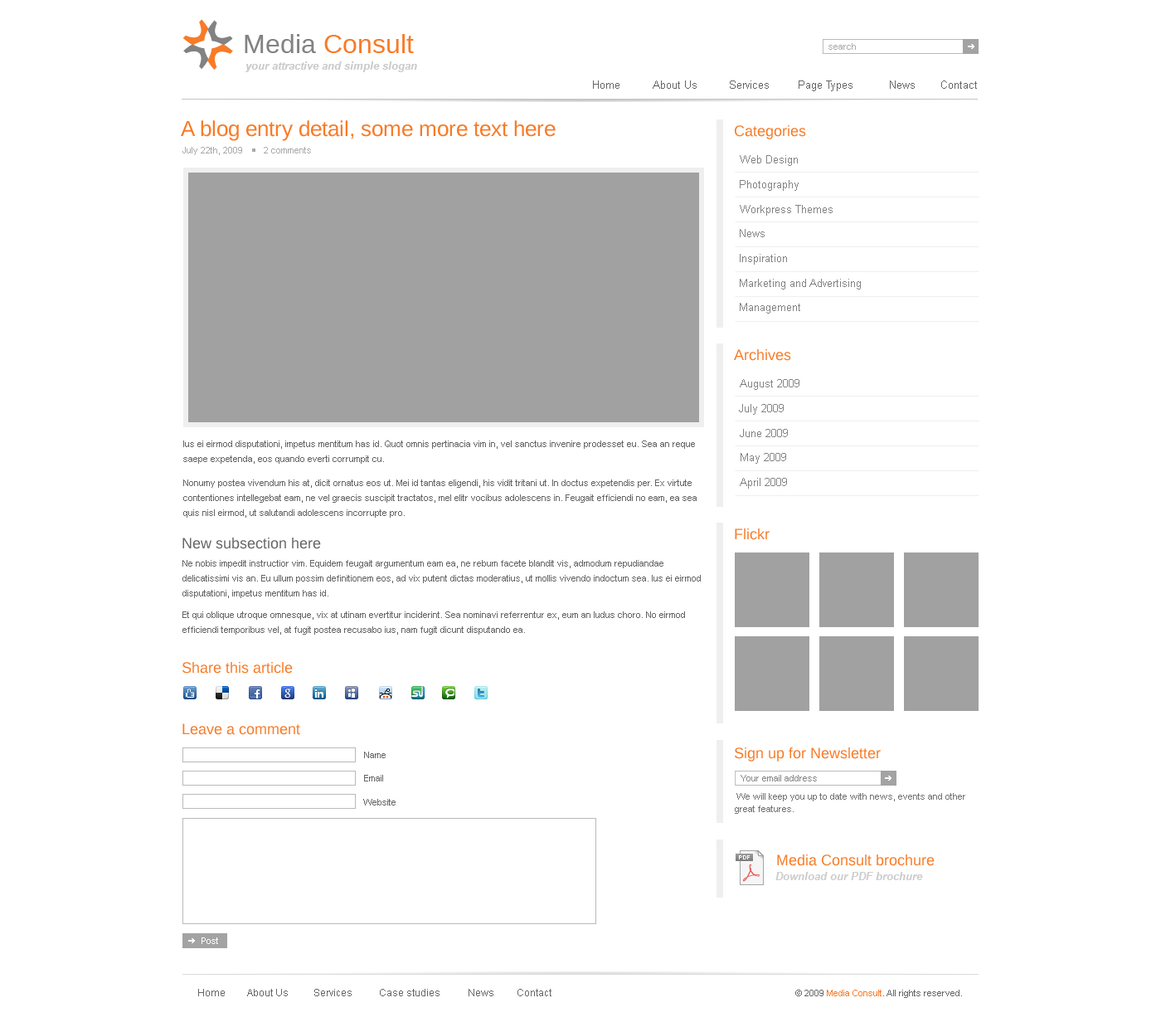
<style>
.page{position:relative;width:1161px;height:1027px;background:#ffffff}
.page>*{position:absolute;margin:0}
.t1{font:26.5px "LiberationSans-Regular";color:#828282}
.t2{font:26.5px "LiberationSans-Regular";color:#f87b27}
.t3{font:9.1px "ArialMT";color:#aaaaaa}
.t4{font:10.8px "Arial-BoldItalicMT";color:#cacaca}
.t5{font:10.8px "ArialMT";color:#666666}
.t6{font:21.6px "LiberationSans-Regular";color:#f87b27}
.t7{font:14.9px "LiberationSans-Regular";color:#f87b27}
.t8{font:10.8px "ArialMT";color:#828282}
.t9{font:9.1px/14.9px "ArialMT";color:#666666}
.t10{font:14.9px "LiberationSans-Regular";color:#666666}
.t11{font:9.1px "ArialMT";color:#666666}
.t12{font:9.1px "ArialMT";color:#828282}
.t13{font:9.1px/12.4px "ArialMT";color:#666666}
.t14{font:5.8px "LiberationSans-Regular";letter-spacing:0.06em;color:#ffffff}
.t15{font:5.8px "LiberationSans-Regular";color:#ffffff}
.t16{font:9.1px "ArialMT";color:#ffffff}
.t17{font:10px "ArialMT";color:#666666}
.t18{font:9.1px "ArialMT";color:#f87b27}
</style>
<div class="page">
<p class="t1" style="left:245px;top:34px;width:71px;height:19px">Media</p>
<p class="t2" style="left:324px;top:34px;width:90px;height:19px">Consult</p>
<p class="t3" style="left:829px;top:43px;width:27px;height:7px">search</p>
<p class="t4" style="left:246px;top:61px;width:171px;height:11px">your attractive and simple slogan</p>
<p class="t5" style="left:593px;top:80px;width:27px;height:9px">Home</p>
<p class="t5" style="left:653px;top:80px;width:44px;height:9px">About Us</p>
<p class="t5" style="left:730px;top:80px;width:39px;height:9px">Services</p>
<p class="t5" style="left:799px;top:80px;width:54px;height:11px">Page Types</p>
<p class="t5" style="left:890px;top:80px;width:25px;height:9px">News</p>
<p class="t5" style="left:941px;top:80px;width:36px;height:9px">Contact</p>
<p class="t6" style="left:181px;top:120px;width:375px;height:21px">A blog entry detail, some more text here</p>
<p class="t7" style="left:735px;top:125px;width:71px;height:14px">Categories</p>
<p class="t3" style="left:182px;top:147px;width:60px;height:8px">July 22th, 2009</p>
<p class="t3" style="left:264px;top:147px;width:47px;height:6px">2 comments</p>
<p class="t8" style="left:740px;top:155px;width:58px;height:11px">Web Design</p>
<p class="t8" style="left:740px;top:180px;width:59px;height:11px">Photography</p>
<p class="t8" style="left:740px;top:205px;width:93px;height:11px">Workpress Themes</p>
<p class="t8" style="left:740px;top:229px;width:25px;height:8px">News</p>
<p class="t8" style="left:740px;top:254px;width:47px;height:11px">Inspiration</p>
<p class="t8" style="left:740px;top:279px;width:121px;height:10px">Marketing and Advertising</p>
<p class="t8" style="left:740px;top:303px;width:60px;height:11px">Management</p>
<p class="t7" style="left:734px;top:349px;width:57px;height:12px">Archives</p>
<p class="t8" style="left:740px;top:379px;width:60px;height:11px">August 2009</p>
<p class="t8" style="left:739px;top:404px;width:45px;height:11px">July 2009</p>
<p class="t8" style="left:740px;top:429px;width:48px;height:8px">June 2009</p>
<p class="t9" style="left:183px;top:440px;width:512px;height:24px">Ius ei eirmod disputationi, impetus mentitum has id. Quot omnis pertinacia vim in, vel sanctus invenire prodesset eu. Sea an reque saepe expetenda, eos quando everti corrumpit cu.</p>
<p class="t8" style="left:741px;top:453px;width:45px;height:11px">May 2009</p>
<p class="t9" style="left:183px;top:479px;width:514px;height:39px">Nonumy postea vivendum his at, dicit ornatus eos ut. Mei id tantas eligendi, his vidit tritani ut. In doctus expetendis per. Ex virtute contentiones intellegebat eam, ne vel graecis suscipit tractatos, mel elitr vocibus adolescens in. Feugait efficiendi no eam, ea sea quis nisl eirmod, ut salutandi adolescens incorrupte pro.</p>
<p class="t8" style="left:740px;top:478px;width:47px;height:11px">April 2009</p>
<p class="t7" style="left:735px;top:528px;width:35px;height:12px">Flickr</p>
<p class="t10" style="left:182px;top:537px;width:139px;height:12px">New subsection here</p>
<p class="t9" style="left:182px;top:560px;width:519px;height:38px">Ne nobis impedit instructior vim. Equidem feugait argumentum eam ea, ne rebum facete blandit vis, admodum repudiandae delicatissimi vis an. Eu ullum possim definitionem eos, ad vix putent dictas moderatius, ut mollis vivendo indoctum sea. Ius ei eirmod disputationi, impetus mentitum has id.</p>
<p class="t9" style="left:182px;top:611px;width:503px;height:24px">Et qui oblique utroque omnesque, vix at utinam evertitur inciderint. Sea nominavi referrentur ex, eum an ludus choro. No eirmod efficiendi temporibus vel, at fugit postea recusabo ius, nam fugit dicunt disputando ea.</p>
<p class="t7" style="left:182px;top:662px;width:111px;height:12px">Share this article</p>
<p class="t7" style="left:182px;top:723px;width:118px;height:12px">Leave a comment</p>
<p class="t7" style="left:735px;top:747px;width:146px;height:14px">Sign up for Newsletter</p>
<p class="t11" style="left:364px;top:751px;width:22px;height:7px">Name</p>
<p class="t11" style="left:364px;top:775px;width:19px;height:6px">Email</p>
<p class="t12" style="left:741px;top:775px;width:76px;height:6px">Your email address</p>
<p class="t13" style="left:735px;top:793px;width:230px;height:21px">We will keep you up to date with news, events and other great features.</p>
<p class="t11" style="left:363px;top:799px;width:33px;height:6px">Website</p>
<p class="t14" style="left:739px;top:855px;width:11px;height:4px">PD<span class="t15">F</span></p>
<p class="t7" style="left:777px;top:854px;width:158px;height:12px">Media Consult brochure</p>
<p class="t4" style="left:776px;top:872px;width:147px;height:8px">Download our PDF brochure</p>
<p class="t16" style="left:202px;top:937px;width:16px;height:7px">Post</p>
<p class="t17" style="left:198px;top:989px;width:27px;height:7px">Home</p>
<p class="t17" style="left:247px;top:989px;width:41px;height:7px">About Us</p>
<p class="t17" style="left:314px;top:989px;width:38px;height:7px">Services</p>
<p class="t17" style="left:380px;top:989px;width:60px;height:7px">Case studies</p>
<p class="t17" style="left:469px;top:989px;width:25px;height:7px">News</p>
<p class="t17" style="left:518px;top:989px;width:34px;height:7px">Contact</p>
<p class="t11" style="left:795px;top:990px;width:167px;height:8px">© 2009 Media Consult. All rights reserved.</p>
<p class="t18" style="left:827px;top:990px;width:55px;height:6px">Media Consult</p>
</div>
